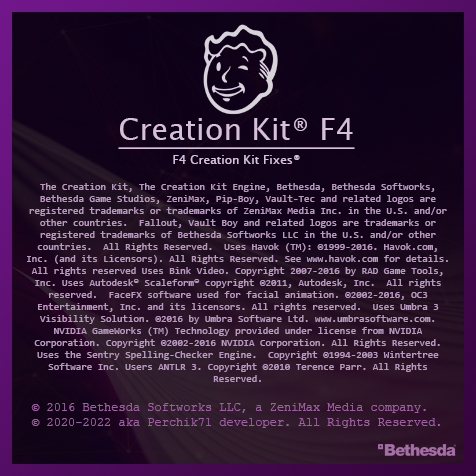
<style>
.page{position:relative;width:476px;height:476px}
.page>*{position:absolute;margin:0}
.t1{font:12px "LucidaSansUnicode";color:#d6bfd8}
.t2{font:30px "LucidaSansUnicode";color:#d6bfd8;text-decoration:underline}
.t3{font:10px "Consolas";color:#ba99c1}
.t4{font:12px "CourierNewPSMT";color:#9f60a3}
</style>
<div class="page">
<p class="t1" style="left:118px;top:118px;width:237px;height:46px;text-align:center"><span class="t2">Creation Kit® F4<br><br></span>F4 Creation Kit Fixes®</p>
<p class="t3" style="left:27px;top:183px;width:421px;height:199px;text-align:center">The Creation Kit, The Creation Kit Engine, Bethesda, Bethesda Softworks, Bethesda Game Studios, ZeniMax, Pip-Boy, Vault-Tec and related logos are registered trademarks or trademarks of ZeniMax Media Inc. in the U.S. and/or other countries.  Fallout, Vault Boy and related logos are trademarks or registered trademarks of Bethesda Softworks LLC in the U.S. and/or other countries.  All Rights Reserved.  Uses Havok (TM): ©1999-2016. Havok.com, Inc. (and its Licensors). All Rights Reserved. See www.havok.com for details.  All rights reserved Uses Bink Video. Copyright 2007-2016 by RAD Game Tools, Inc. Uses Autodesk® Scaleform® copyright ©2011, Autodesk, Inc.  All rights reserved.  FaceFX software used for facial animation. ©2002-2016, OC3 Entertainment, Inc. and its licensors. All rights reserved.  Uses Umbra 3 Visibility Solution. ©2016 by Umbra Software Ltd. www.umbrasoftware.com. NVIDIA GameWorks (TM) Technology provided under license from NVIDIA Corporation. Copyright ©2002-2016 NVIDIA Corporation. All Rights Reserved. Uses the Sentry Spelling-Checker Engine.  Copyright ©1994-2003 Wintertree Software Inc. Users ANTLR 3. Copyright ©2010 Terence Parr. All Rights Reserved.</p>
<p class="t4" style="left:31px;top:403px;width:409px;height:25px;text-align:right">© 2016 Bethesda Softworks LLC, a ZeniMax Media company.<br>© 2020-2022 aka Perchik71 developer. All Rights Reserved.</p>
</div>
